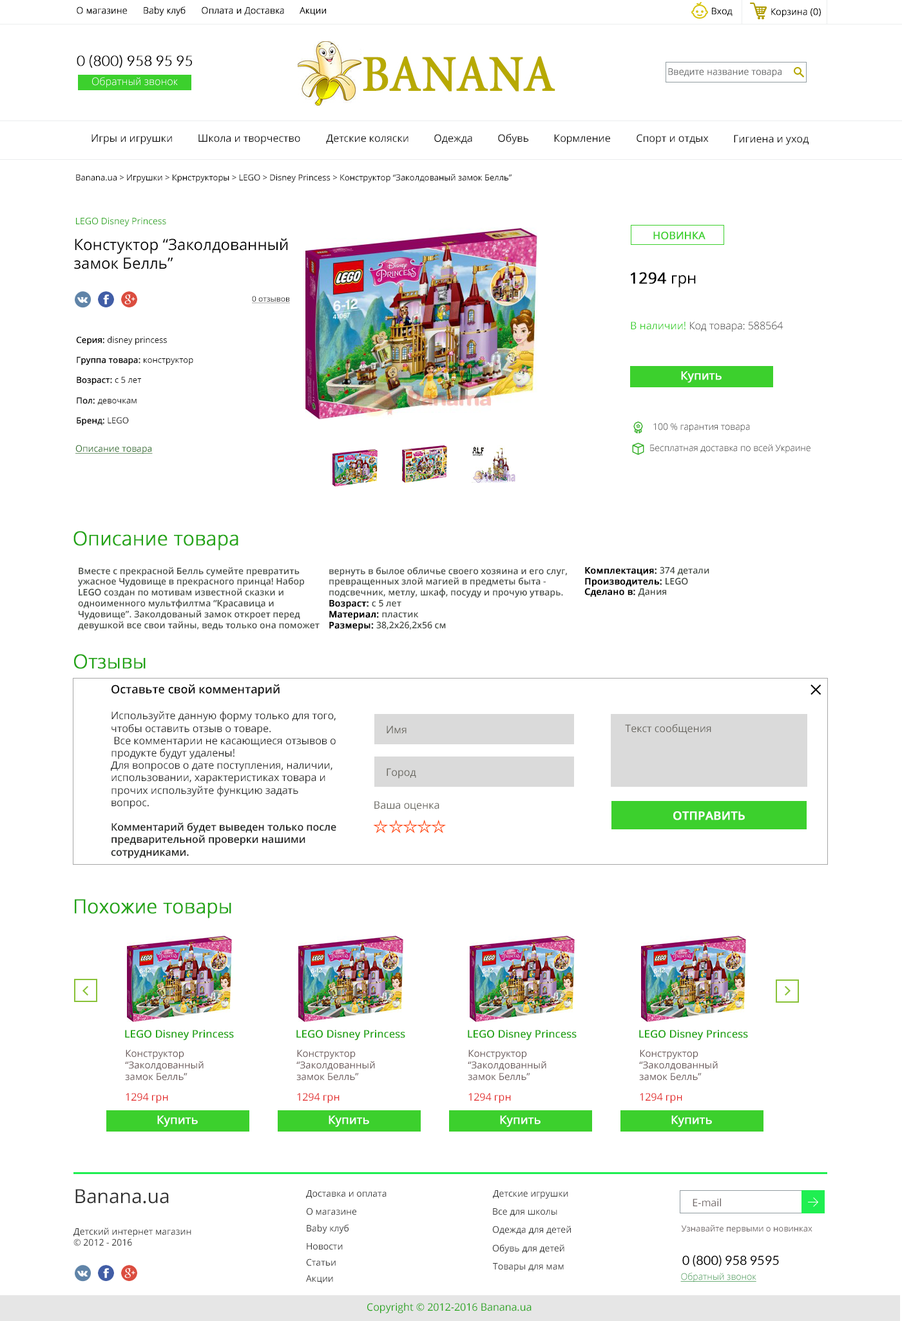
<style>
.page{position:relative;width:902px;height:1321px;background:#ffffff}
.page>*{position:absolute;margin:0}
.t1{font:9px "OpenSans-Light";color:#000000;font-weight:bold}
.t2{font:14.2px "Lato-Light";color:#060606;font-weight:bold}
.t3{font:10.3px "OpenSans-Light";color:#fefefe}
.t4{font:9px "OpenSans-Light";color:#6c6e6f;font-weight:bold}
.t5{font:10.3px "OpenSans";color:#060606}
.t6{font:8.4px "OpenSans";color:#000000}
.t7{font:9px "OpenSans";color:#33a827}
.t8{font:10.3px "OpenSans";color:#3cd02d;font-weight:bold}
.t9{font:15.5px "OpenSans";color:#000000}
.t10{font:15.5px "OpenSans";color:#000000;font-weight:bold}
.t11{font:7.7px "OpenSans";color:#050505;text-decoration:underline}
.t12{font:10.3px "OpenSans-Light";color:#060706}
.t13{font:10.3px "OpenSans";color:#3cd02d}
.t14{font:8.4px "OpenSans";color:#050505}
.t15{font:8.4px "OpenSans";color:#050505;font-weight:bold}
.t16{font:11.6px "OpenSans";color:#ffffff;font-weight:bold}
.t17{font:9px "OpenSans-Light";color:#000000}
.t18{font:9px "OpenSans";color:#296a23;text-decoration:underline}
.t19{font:19.3px "OpenSans-Light";color:#24a517;font-weight:bold}
.t20{font:9px "OpenSans-Semibold";color:#444a44}
.t21{font:9px "OpenSans-Semibold";color:#010101;font-weight:bold}
.t22{font:10.3px "OpenSans";color:#242524}
.t23{font:11.6px "OpenSans-Semibold";color:#0a0a0a}
.t24{font:10.3px "OpenSans-Semibold";color:#242524}
.t25{font:10.3px "OpenSans";color:#67655e}
.t26{font:11.6px "OpenSans-Semibold";color:#ffffff;text-transform:uppercase;font-weight:bold}
.t27{font:10.3px "OpenSans";color:#24a517;font-weight:bold}
.t28{font:9.7px "OpenSans";color:#655555}
.t29{font:10.3px "OpenSans";color:#e22323}
.t30{font:19.3px "OpenSans";color:#333333}
.t31{font:9px "OpenSans";color:#333333}
.t32{font:10.3px "OpenSans";color:#746c6c}
.t33{font:8.4px "OpenSans";color:#746c6c}
.t34{font:12.9px "Lato-Regular";color:#000000}
.t35{font:9px "OpenSans-Light";text-decoration:underline}
.t36{font:10.3px "OpenSans";color:#24a517}
</style>
<div class="page">
<p class="t1" style="left:77px;top:6px;width:50px;height:8px">О магазине</p>
<p class="t1" style="left:144px;top:6px;width:42px;height:10px">Baby клуб</p>
<p class="t1" style="left:202px;top:6px;width:82px;height:9px">Оплата и Доставка</p>
<p class="t1" style="left:300px;top:7px;width:26px;height:8px">Акции</p>
<p class="t1" style="left:712px;top:8px;width:21px;height:8px">Вход</p>
<p class="t1" style="left:772px;top:8px;width:49px;height:9px">Корзина (0)</p>
<p class="t2" style="left:77px;top:55px;width:115px;height:13px">0 (800) 958 95 95</p>
<p class="t3" style="left:92px;top:77px;width:86px;height:11px">Обратный звонок</p>
<p class="t4" style="left:668px;top:68px;width:114px;height:9px">Введите название товара</p>
<p class="t5" style="left:92px;top:134px;width:80px;height:10px">Игры и игрушки</p>
<p class="t5" style="left:199px;top:134px;width:101px;height:10px">Школа и творчество</p>
<p class="t5" style="left:326px;top:134px;width:83px;height:10px">Детские коляски</p>
<p class="t5" style="left:434px;top:134px;width:38px;height:10px">Одежда</p>
<p class="t5" style="left:498px;top:133px;width:31px;height:11px">Обувь</p>
<p class="t5" style="left:554px;top:134px;width:56px;height:10px">Кормление</p>
<p class="t5" style="left:637px;top:134px;width:72px;height:10px">Спорт и отдых</p>
<p class="t5" style="left:734px;top:135px;width:75px;height:10px">Гигиена и уход</p>
<p class="t6" style="left:76px;top:174px;width:436px;height:8px">Banana.ua &gt; Игрушки &gt; Крнструкторы &gt; LEGO &gt; Disney Princess &gt; Конструктор “Заколдованый замок Белль”</p>
<p class="t7" style="left:76px;top:217px;width:90px;height:10px">LEGO Disney Princess</p>
<p class="t8" style="left:654px;top:231px;width:52px;height:9px">НОВИНКА</p>
<p class="t9" style="left:74px;top:238px;width:214px;height:31px">Констуктор “Заколдованный замок Белль”</p>
<p class="t10" style="left:630px;top:272px;width:66px;height:15px">1294 <span class="t9">грн</span></p>
<p class="t11" style="left:252px;top:296px;width:38px;height:8px">0 отзывов</p>
<p class="t12" style="left:631px;top:322px;width:153px;height:10px"><span class="t13">В наличии! </span>Код товара: 588564</p>
<p class="t14" style="left:76px;top:336px;width:117px;height:90px"><span class="t15">Серия: </span>disney princess<br><span class="t15"><br>Группа товара: </span>конструктор<br><span class="t15"><br>Возраст: </span>с 5 лет<br><span class="t15"><br>Пол: </span>девочкам<br><span class="t15"><br>Бренд: </span>LEGO</p>
<p class="t16" style="left:681px;top:371px;width:41px;height:12px">Купить</p>
<p class="t17" style="left:654px;top:423px;width:96px;height:10px">100 % гарантия товара</p>
<p class="t18" style="left:75px;top:445px;width:78px;height:9px">Описание товара</p>
<p class="t17" style="left:650px;top:444px;width:161px;height:10px">Бесплатная доставка по всей Украине</p>
<p class="t19" style="left:73px;top:531px;width:165px;height:19px">Описание товара</p>
<p class="t20" style="left:78px;top:567px;width:242px;height:64px">Вместе с прекрасной Белль сумейте превратить<br>ужасное Чудовище в прекрасного принца! Набор<br>LEGO создан по мотивам известной сказки и <br>одноименного мультфилтма “Красавица и<br>Чудовище”. Заколдованый замок откроет перед<br>девушкой все свои тайны, ведь только она поможет</p>
<p class="t20" style="left:329px;top:567px;width:238px;height:64px">вернуть в былое обличье своего хозяина и его слуг,<br>превращенных злой магией в предметы быта - <br>подсвечник, метлу, шкаф, посуду и прочую утварь.<br><span class="t21">Возраст: </span>с 5 лет<br><span class="t21">Материал: </span>пластик<br><span class="t21">Размеры: </span>38,2х26,2х56 см</p>
<p class="t21" style="left:585px;top:567px;width:125px;height:30px">Комплектация: <span class="t20">374 детали<br></span>Производитель: <span class="t20">LEGO<br></span>Сделано в: <span class="t20">Дания</span></p>
<p class="t19" style="left:74px;top:654px;width:72px;height:15px">Отзывы</p>
<p class="t22" style="left:111px;top:685px;width:225px;height:174px"><span class="t23">Оставьте свой комментарий<br><br></span>Используйте данную форму только для того, чтобы оставить отзыв о товаре.<br> Все комментарии не касающиеся отзывов о продукте будут удалены! <br>Для вопросов о дате поступления, наличии, использовании, характеристиках товара и прочих используйте функцию задать вопрос.<br><br><span class="t24">Комментарий будет выведен только после предварительной проверки нашими сотрудниками.</span></p>
<p class="t25" style="left:387px;top:726px;width:20px;height:8px">Имя</p>
<p class="t25" style="left:625px;top:724px;width:87px;height:10px">Текст сообщения</p>
<p class="t25" style="left:387px;top:768px;width:29px;height:11px">Город</p>
<p class="t25" style="left:375px;top:801px;width:65px;height:10px">Ваша оценка</p>
<p class="t26" style="left:674px;top:812px;width:71px;height:9px">ОТПРАВИТЬ</p>
<p class="t19" style="left:75px;top:899px;width:156px;height:20px">Похожие товары</p>
<p class="t27" style="left:125px;top:1030px;width:109px;height:10px">LEGO Disney Princess</p>
<p class="t27" style="left:297px;top:1030px;width:108px;height:10px">LEGO Disney Princess</p>
<p class="t27" style="left:468px;top:1030px;width:109px;height:10px">LEGO Disney Princess</p>
<p class="t27" style="left:639px;top:1030px;width:109px;height:10px">LEGO Disney Princess</p>
<p class="t28" style="left:125px;top:1050px;width:79px;height:31px">Конструктор “Заколдованный замок Белль”</p>
<p class="t28" style="left:297px;top:1050px;width:78px;height:31px">Конструктор “Заколдованный замок Белль”</p>
<p class="t28" style="left:468px;top:1050px;width:79px;height:31px">Конструктор “Заколдованный замок Белль”</p>
<p class="t28" style="left:639px;top:1050px;width:79px;height:31px">Конструктор “Заколдованный замок Белль”</p>
<p class="t29" style="left:126px;top:1093px;width:42px;height:11px">1294 грн</p>
<p class="t29" style="left:297px;top:1093px;width:43px;height:11px">1294 грн</p>
<p class="t29" style="left:469px;top:1093px;width:42px;height:11px">1294 грн</p>
<p class="t29" style="left:640px;top:1093px;width:43px;height:11px">1294 грн</p>
<p class="t16" style="left:157px;top:1116px;width:41px;height:11px">Купить</p>
<p class="t16" style="left:329px;top:1116px;width:40px;height:11px">Купить</p>
<p class="t16" style="left:500px;top:1116px;width:41px;height:11px">Купить</p>
<p class="t16" style="left:672px;top:1116px;width:40px;height:11px">Купить</p>
<p class="t30" style="left:75px;top:1189px;width:94px;height:15px">Banana.ua</p>
<p class="t31" style="left:306px;top:1191px;width:81px;height:8px">Доставка и оплата</p>
<p class="t31" style="left:493px;top:1191px;width:76px;height:9px">Детские игрушки</p>
<p class="t32" style="left:693px;top:1198px;width:28px;height:9px">E-mail</p>
<p class="t31" style="left:306px;top:1208px;width:50px;height:8px">О магазине</p>
<p class="t31" style="left:493px;top:1209px;width:65px;height:8px">Все для школы</p>
<p class="t31" style="left:73px;top:1228px;width:118px;height:19px">Детский интернет магазин<br>© 2012 - 2016</p>
<p class="t31" style="left:307px;top:1225px;width:42px;height:9px">Baby клуб</p>
<p class="t31" style="left:492px;top:1226px;width:79px;height:9px">Одежда для детей</p>
<p class="t33" style="left:681px;top:1225px;width:132px;height:9px">Узнавайте первыми о новинках</p>
<p class="t31" style="left:307px;top:1243px;width:36px;height:7px">Новости</p>
<p class="t31" style="left:492px;top:1245px;width:73px;height:9px">Обувь для детей</p>
<p class="t31" style="left:306px;top:1259px;width:30px;height:8px">Статьи</p>
<p class="t31" style="left:493px;top:1263px;width:71px;height:9px">Товары для мам</p>
<p class="t34" style="left:683px;top:1255px;width:96px;height:12px">0 (800) 958 9595</p>
<p class="t31" style="left:306px;top:1276px;width:27px;height:8px">Акции</p>
<p class="t35" style="left:681px;top:1273px;width:76px;height:10px">Обратный звонок</p>
<p class="t36" style="left:367px;top:1303px;width:165px;height:11px">Copyright © 2012-2016 Banana.ua</p>
</div>
